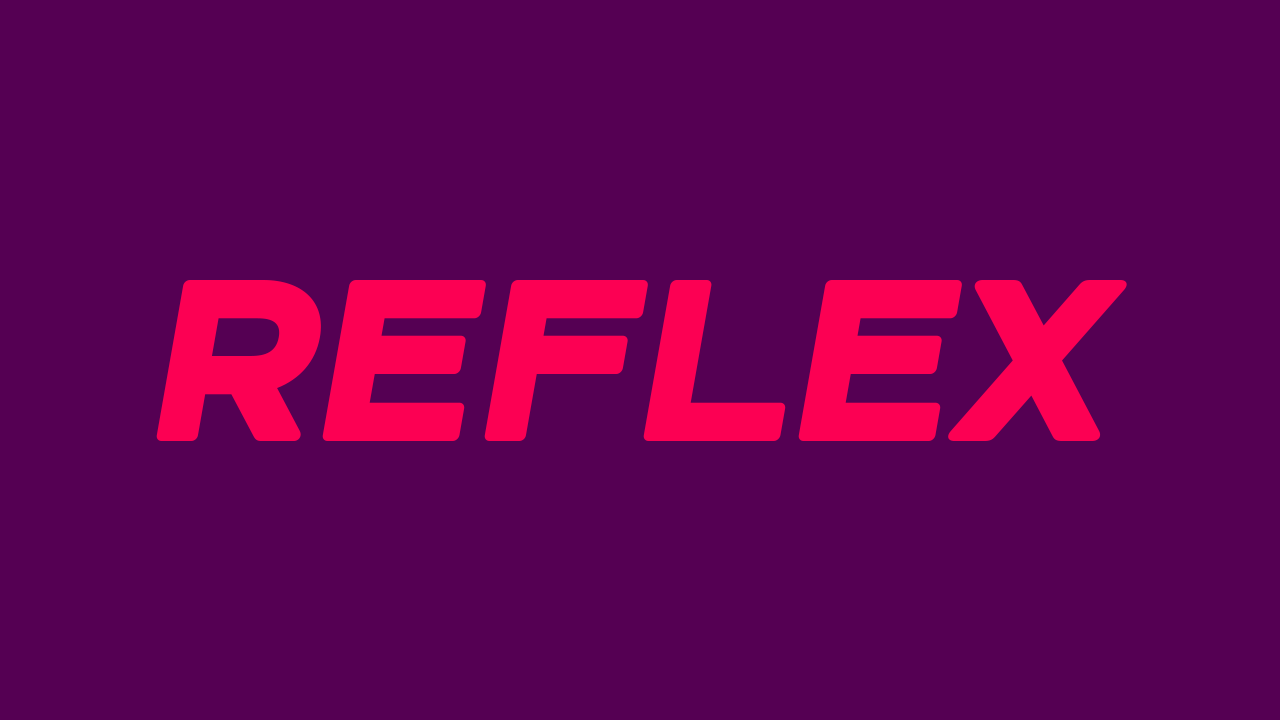
<style>
.page{position:relative;width:1280px;height:720px;background:#550053}
.page>*{position:absolute;margin:0}
.t1{font:230.6px "Ginerin-Regular";color:#fc0053;font-style:italic}
</style>
<div class="page">
<p class="t1" style="left:156px;top:280px;width:971px;height:161px">REFLEX</p>
</div>
